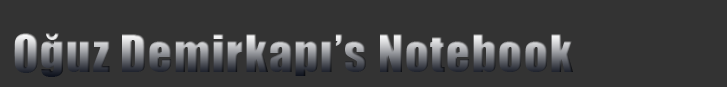
<style>
.page{position:relative;width:727px;height:87px;background:#333333}
.page>*{position:absolute;margin:0}
.t1{font:48px "Impact";letter-spacing:0.025em}
</style>
<div class="page">
<p class="t1" style="left:14px;top:33px;width:559px;height:44px">Oğuz Demirkapı’s Notebook</p>
</div>
